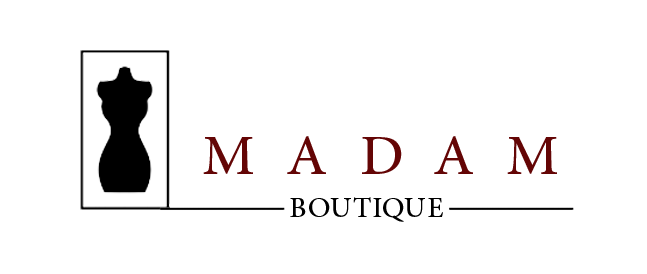
<style>
.page{position:relative;width:647px;height:274px;background:#ffffff}
.page>*{position:absolute;margin:0}
.t1{font:80px "AdobeArabic-Regular";letter-spacing:0.4em;color:#640505}
.t2{font:40px "AdobeArabic-Regular";letter-spacing:0.01em;color:#000000}
</style>
<div class="page">
<p class="t1" style="left:203px;top:136px;width:354px;height:38px">MADAM</p>
<p class="t2" style="left:290px;top:197px;width:153px;height:25px">BOUTIQUE</p>
</div>
